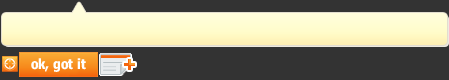
<style>
.page{position:relative;width:449px;height:80px;background:#333333}
.page>*{position:absolute;margin:0}
.t1{font:14px "Nina-Bold";color:#ffffff}
</style>
<div class="page">
<p class="t1" style="left:31px;top:58px;width:55px;height:14px">ok, got it</p>
</div>
